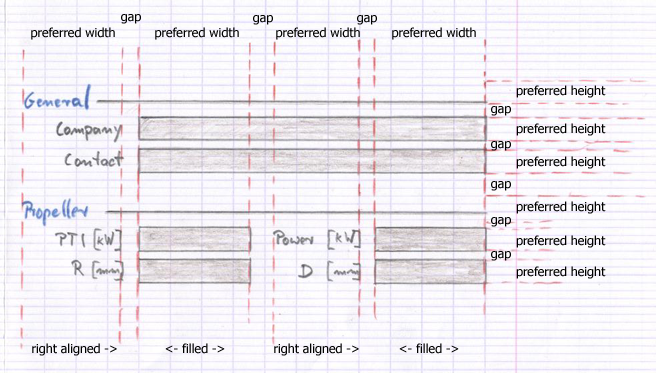
<style>
.page{position:relative;width:656px;height:373px}
.page>*{position:absolute;margin:0}
.t1{font:12.5px "Tahoma";color:#000000}
</style>
<div class="page">
<p class="t1" style="left:121px;top:14px;width:20px;height:10px">gap</p>
<p class="t1" style="left:253px;top:15px;width:20px;height:10px">gap</p>
<p class="t1" style="left:357px;top:15px;width:20px;height:10px">gap</p>
<p class="t1" style="left:31px;top:27px;width:84px;height:13px">preferred width</p>
<p class="t1" style="left:155px;top:27px;width:84px;height:13px">preferred width</p>
<p class="t1" style="left:276px;top:27px;width:84px;height:13px">preferred width</p>
<p class="t1" style="left:392px;top:27px;width:84px;height:13px">preferred width</p>
<p class="t1" style="left:516px;top:85px;width:90px;height:13px">preferred height</p>
<p class="t1" style="left:491px;top:106px;width:20px;height:10px">gap</p>
<p class="t1" style="left:516px;top:123px;width:90px;height:13px">preferred height</p>
<p class="t1" style="left:491px;top:141px;width:20px;height:10px">gap</p>
<p class="t1" style="left:516px;top:156px;width:90px;height:13px">preferred height</p>
<p class="t1" style="left:491px;top:181px;width:20px;height:10px">gap</p>
<p class="t1" style="left:516px;top:201px;width:90px;height:13px">preferred height</p>
<p class="t1" style="left:491px;top:217px;width:20px;height:10px">gap</p>
<p class="t1" style="left:516px;top:235px;width:90px;height:13px">preferred height</p>
<p class="t1" style="left:491px;top:251px;width:20px;height:10px">gap</p>
<p class="t1" style="left:516px;top:266px;width:90px;height:13px">preferred height</p>
<p class="t1" style="left:32px;top:343px;width:85px;height:13px">right aligned -&gt;</p>
<p class="t1" style="left:165px;top:343px;width:60px;height:11px">&lt;- filled -&gt;</p>
<p class="t1" style="left:274px;top:343px;width:85px;height:13px">right aligned -&gt;</p>
<p class="t1" style="left:399px;top:343px;width:60px;height:11px">&lt;- filled -&gt;</p>
</div>
